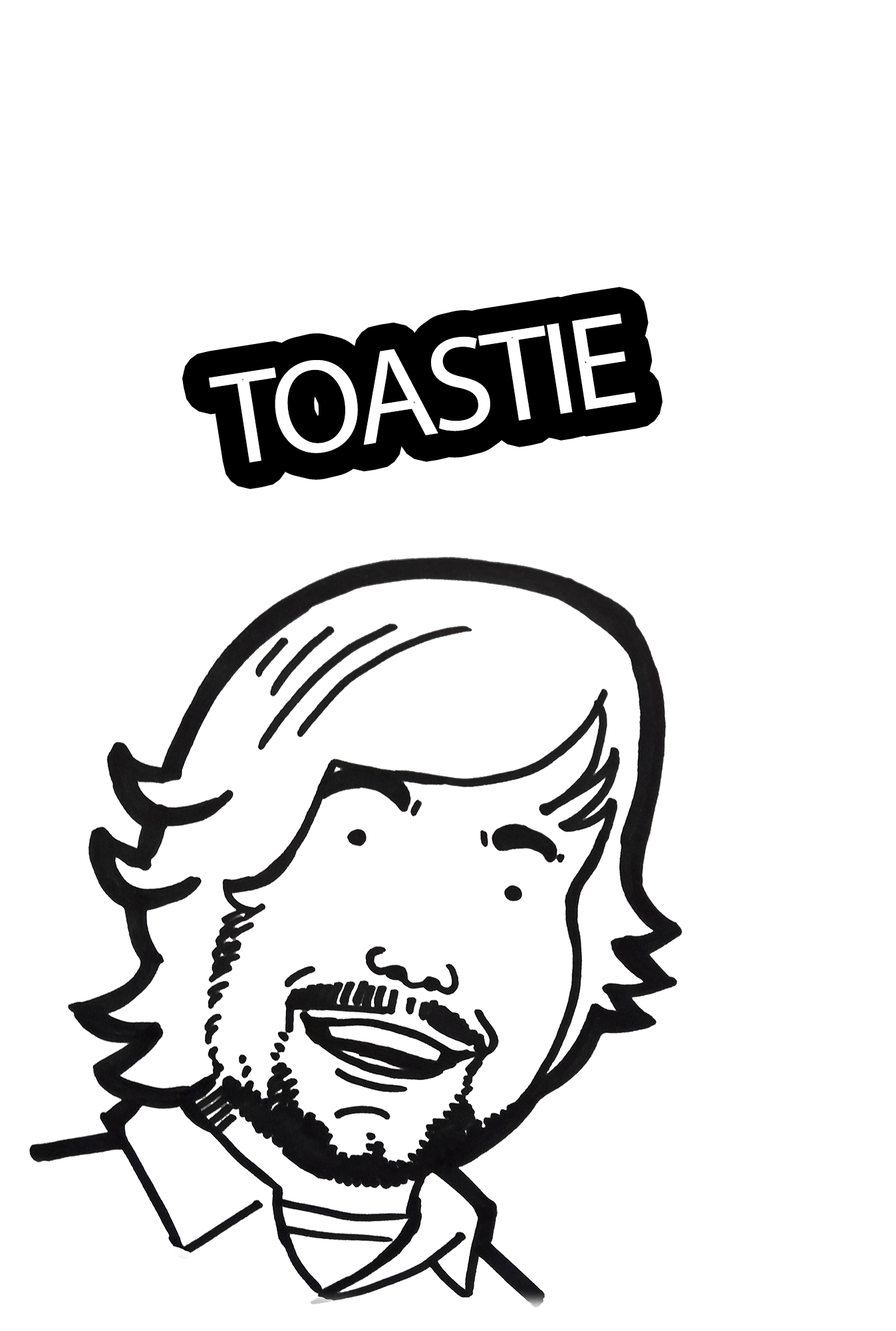
<style>
.page{position:relative;width:896px;height:1331px;background:#ffffff}
.page>*{position:absolute;margin:0}
.t1{font:133.1px "MyriadPro-Regular";letter-spacing:-0.05em;color:#ffffff}
</style>
<div class="page">
<p class="t1" style="left:209px;top:313px;width:427px;height:149px;rotate:-9deg">TOASTIE</p>
</div>
